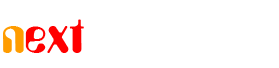
<style>
.page{position:relative;width:279px;height:68px;background:#ffffff}
.page>*{position:absolute;margin:0}
.t1{font:48px "Asimov";color:#ff0000}
.t2{font:48px "Asimov";color:#ff9c00}
</style>
<div class="page">
<p class="t1" style="left:3px;top:19px;width:81px;height:34px"><span class="t2">n</span>ext</p>
</div>
